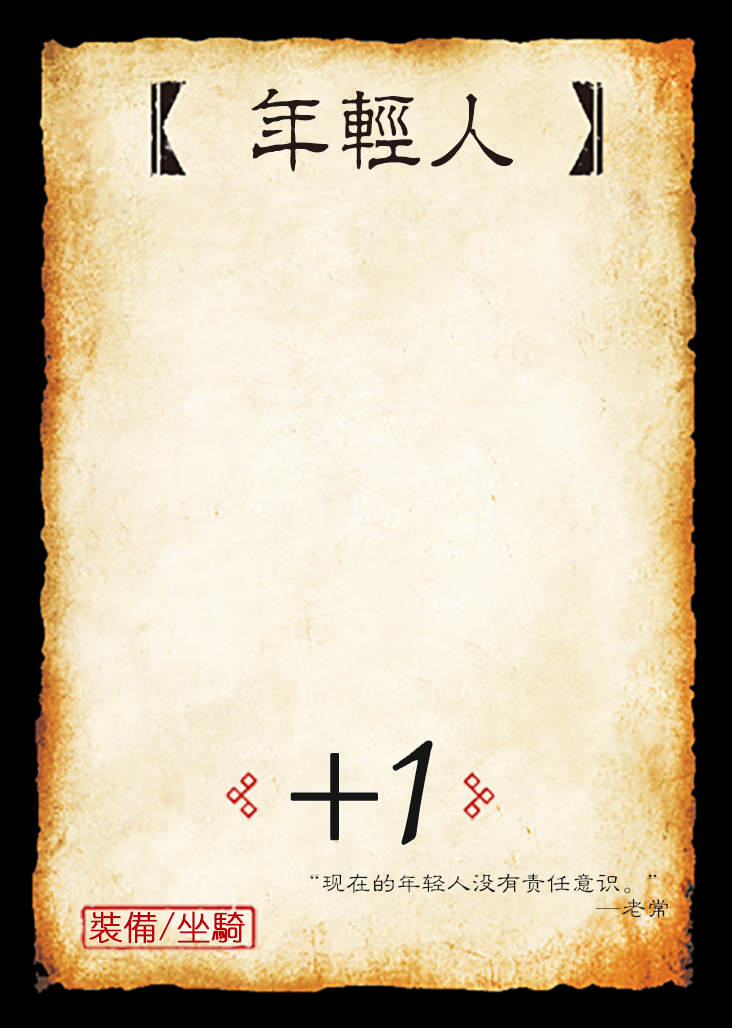
<style>
.page{position:relative;width:732px;height:1028px}
.page>*{position:absolute;margin:0}
.t1{font:95.8px "JMFLS_GBK";color:#221815;scale:0.95 1}
.t2{font:191.7px "Jxixinkai";color:#151515}
.t3{font:141.7px "Jxixinkai";color:#151515}
.t4{font:25px/25px "FZLBJW--GB1-0";color:#151515}
.t5{font:33.3px "YouYuan";color:#ba0007;font-weight:bold}
</style>
<div class="page">
<p class="t1" style="left:251px;top:88px;width:262px;height:84px">年轻人</p>
<p class="t2" style="left:393px;top:741px;width:39px;height:103px">1</p>
<p class="t3" style="left:291px;top:754px;width:86px;height:86px">+</p>
<p class="t4" style="left:310px;top:873px;width:358px;height:45px;text-align:right">“现在的年轻人没有责任意识。”<br>—老常</p>
<p class="t5" style="left:89px;top:911px;width:156px;height:33px">裝備/坐騎</p>
</div>
